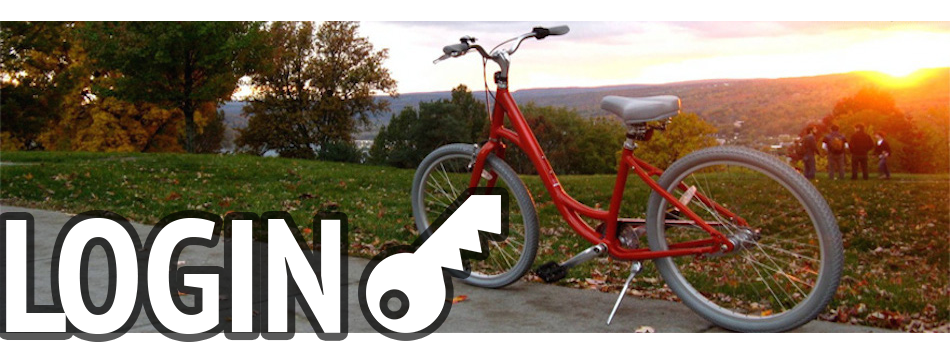
<style>
.page{position:relative;width:950px;height:350px}
.page>*{position:absolute;margin:0}
.t1{font:160px "PTSans-NarrowBold";color:#ffffff}
</style>
<div class="page">
<p class="t1" style="left:6px;top:218px;width:335px;height:116px">LOGIN</p>
</div>
